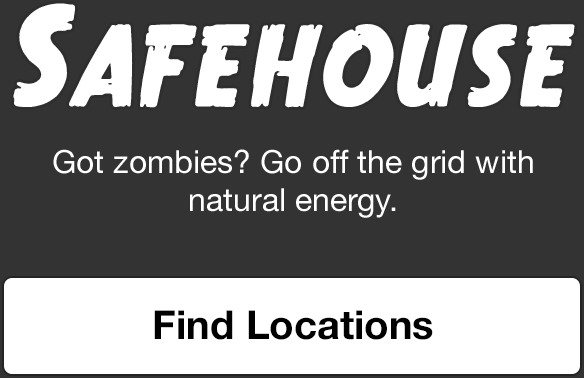
<style>
.page{position:relative;width:584px;height:378px;background:#333333}
.page>*{position:absolute;margin:0}
.t1{font:32px "HelveticaNeue";color:#ffffff}
.t2{font:40px "HelveticaNeue-Bold";color:#000000}
</style>
<div class="page">
<p class="t1" style="left:53px;top:149px;width:480px;height:69px;text-align:center">Got zombies? Go off the grid with natural energy.</p>
<p class="t2" style="left:154px;top:310px;width:279px;height:30px">Find Locations</p>
</div>
